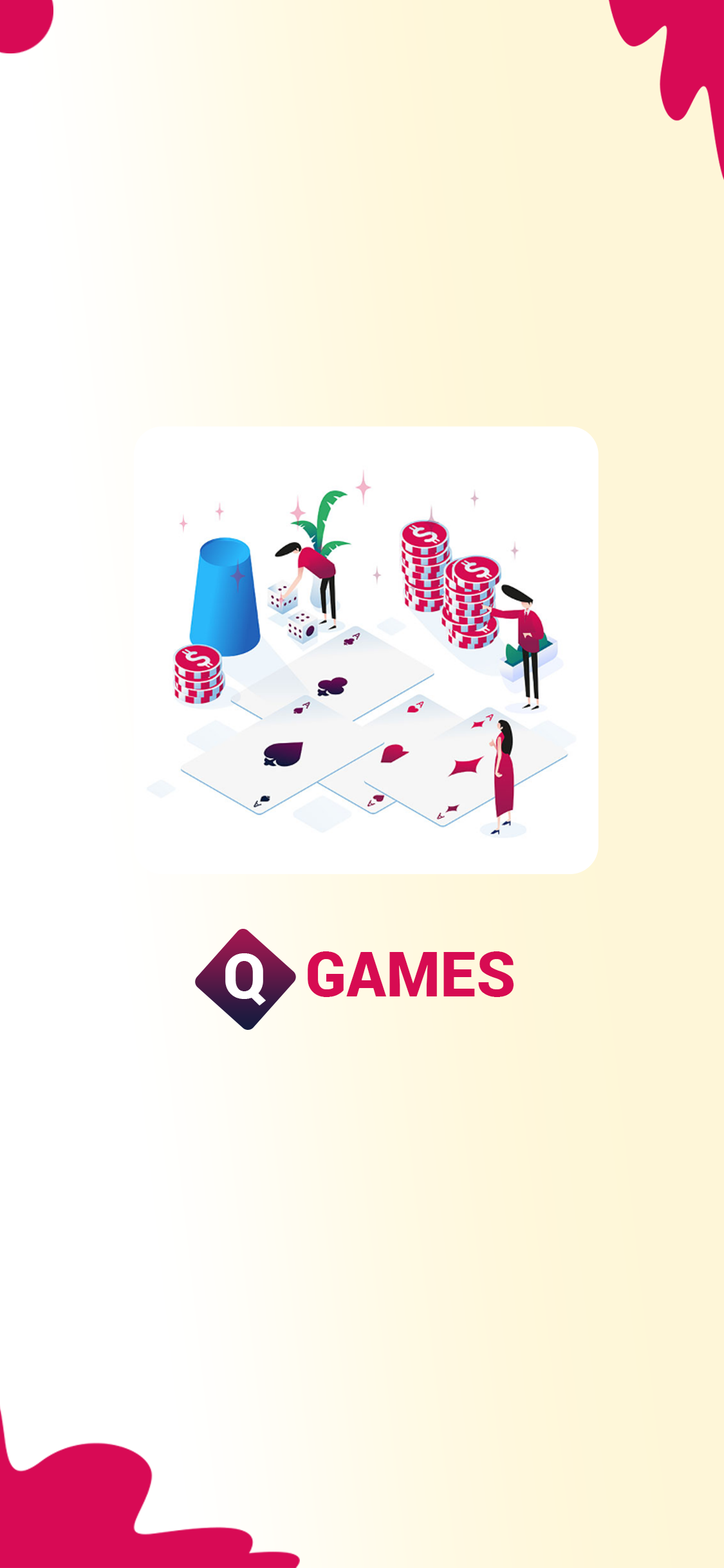
<style>
.page{position:relative;width:724px;height:1568px;background:#ffffff}
.page>*{position:absolute;margin:0}
.t1{font:62.4px "Roboto-Black";letter-spacing:0.005em;color:#ffffff}
.t2{font:62.4px "Roboto-Black";letter-spacing:0.005em;color:#d70b52}
</style>
<div class="page">
<p class="t1" style="left:225px;top:953px;width:41px;height:52px">Q</p>
<p class="t2" style="left:308px;top:951px;width:206px;height:46px">GAMES</p>
</div>
